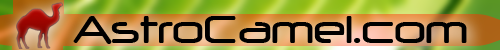
<style>
.page{position:relative;width:500px;height:50px}
.page>*{position:absolute;margin:0}
.t1{font:45px "Neuropol";color:#000000}
</style>
<div class="page">
<p class="t1" style="left:73px;top:16px;width:394px;height:28px">AstroCamel.com</p>
</div>
